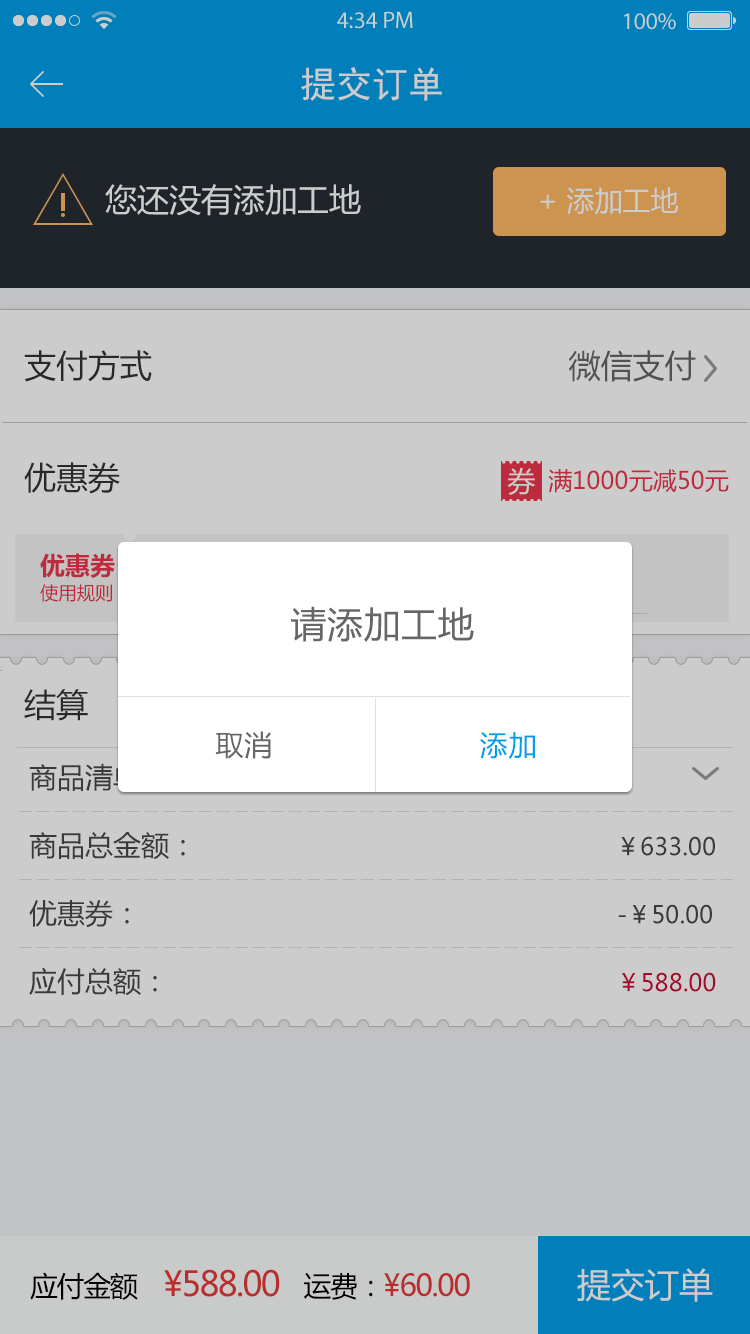
<style>
.page{position:relative;width:750px;height:1334px;background:#cccccc}
.page>*{position:absolute;margin:0}
.t1{font:36px "SimHei";color:#cccccc}
.t2{font:32px "MicrosoftYaHei";color:#cccccc}
.t3{font:28px "MicrosoftYaHei";color:#cccccc}
.t4{font:24px/28px "MicrosoftYaHei";color:#ed364d}
.t5{font:32px/28px "MicrosoftYaHei";color:#333333}
.t6{font:32px/28px "MicrosoftYaHei";color:#666666}
.t7{font:18.3px/24.9px "MicrosoftYaHei";color:#be2b3e}
.t8{font:24.9px/24.9px "MicrosoftYaHei-Bold";color:#be2b3e}
.t9{font:36px "MicrosoftYaHei";letter-spacing:0.025em;color:#666666}
.t10{font:32px "MicrosoftYaHei";color:#333333}
.t11{font:28px "MicrosoftYaHei";letter-spacing:0.025em;color:#666666}
.t12{font:28px "MicrosoftYaHei";letter-spacing:0.025em;color:#009fe8}
.t13{font:28px/68px "MicrosoftYaHei";color:#484848}
.t14{font:24px/68px "MicrosoftYaHei";color:#484848}
.t15{font:24px/68px "MicrosoftYaHei";color:#ce0a34}
.t16{font:34px "MicrosoftYaHei";letter-spacing:-0.05em}
.t17{font:28px "MicrosoftYaHei";letter-spacing:-0.05em}
.t18{font:30px "MicrosoftYaHei";letter-spacing:-0.05em}
.t19{font:34px "MicrosoftYaHei";color:#cccccc}
</style>
<div class="page">
<p class="t1" style="left:301px;top:67px;width:141px;height:34px">提交订单</p>
<p class="t2" style="left:105px;top:184px;width:256px;height:32px">您还没有添加工地</p>
<p class="t3" style="left:540px;top:187px;width:139px;height:28px">+ 添加工地</p>
<p class="t4" style="left:24px;top:350px;width:705px;height:144px"><span class="t5">支付方式                                            </span><span class="t6">微信支付<br><br><br><br></span><span class="t5">优惠券                                                   </span>满1000元减50元</p>
<p class="t3" style="left:507px;top:467px;width:28px;height:28px">券</p>
<p class="t7" style="left:40px;top:553px;width:75px;height:49px"><span class="t8">优惠券<br></span>使用规则</p>
<p class="t9" style="left:291px;top:606px;width:183px;height:36px">请添加工地</p>
<p class="t10" style="left:24px;top:689px;width:64px;height:32px">结算</p>
<p class="t11" style="left:215px;top:731px;width:320px;height:28px">取消<span class="t12">                       添加</span></p>
<p class="t13" style="left:29px;top:763px;width:687px;height:233px">商品清单<br>商品总金额：<span class="t14">                                                           ￥633.00<br></span>优惠券：<span class="t14">                                                                   -￥50.00<br></span>应付总额：                                                               <span class="t15">￥588.00</span></p>
<p class="t16" style="left:30px;top:1269px;width:440px;height:31px"><span class="t17">应付金额</span><span class="t17">：</span>¥588.00   <span class="t17">运费：</span><span class="t18">¥60.00</span></p>
<p class="t19" style="left:577px;top:1268px;width:136px;height:34px">提交订单</p>
</div>
